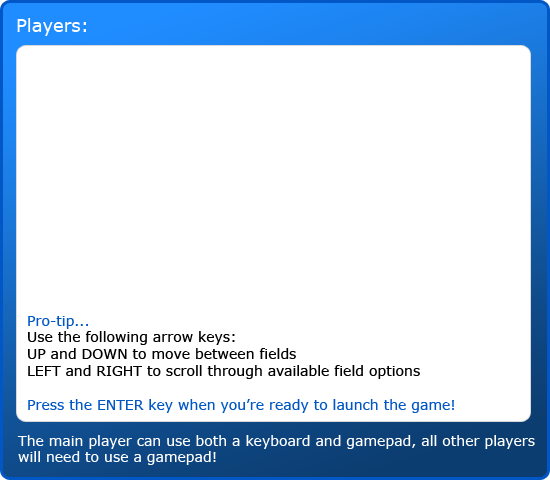
<style>
.page{position:relative;width:550px;height:480px;background:#ffffff}
.page>*{position:absolute;margin:0}
.t1{font:18px "Verdana";color:#ffffff}
.t2{font:14px "Verdana";color:#000000}
.t3{font:14px "Verdana";color:#0057c5}
.t4{font:14px "Verdana";color:#ffffff}
</style>
<div class="page">
<p class="t1" style="left:17px;top:18px;width:69px;height:18px">Players:</p>
<p class="t2" style="left:28px;top:316px;width:426px;height:97px"><span class="t3">Pro-tip...<br></span>Use the following arrow keys:<br>UP and DOWN to move between fields<br>LEFT and RIGHT to scroll through available field options<br><br><span class="t3">Press the ENTER key when you’re ready to launch the game!</span></p>
<p class="t4" style="left:17px;top:435px;width:518px;height:30px">The main player can use both a keyboard and gamepad, all other players will need to use a gamepad!</p>
</div>
